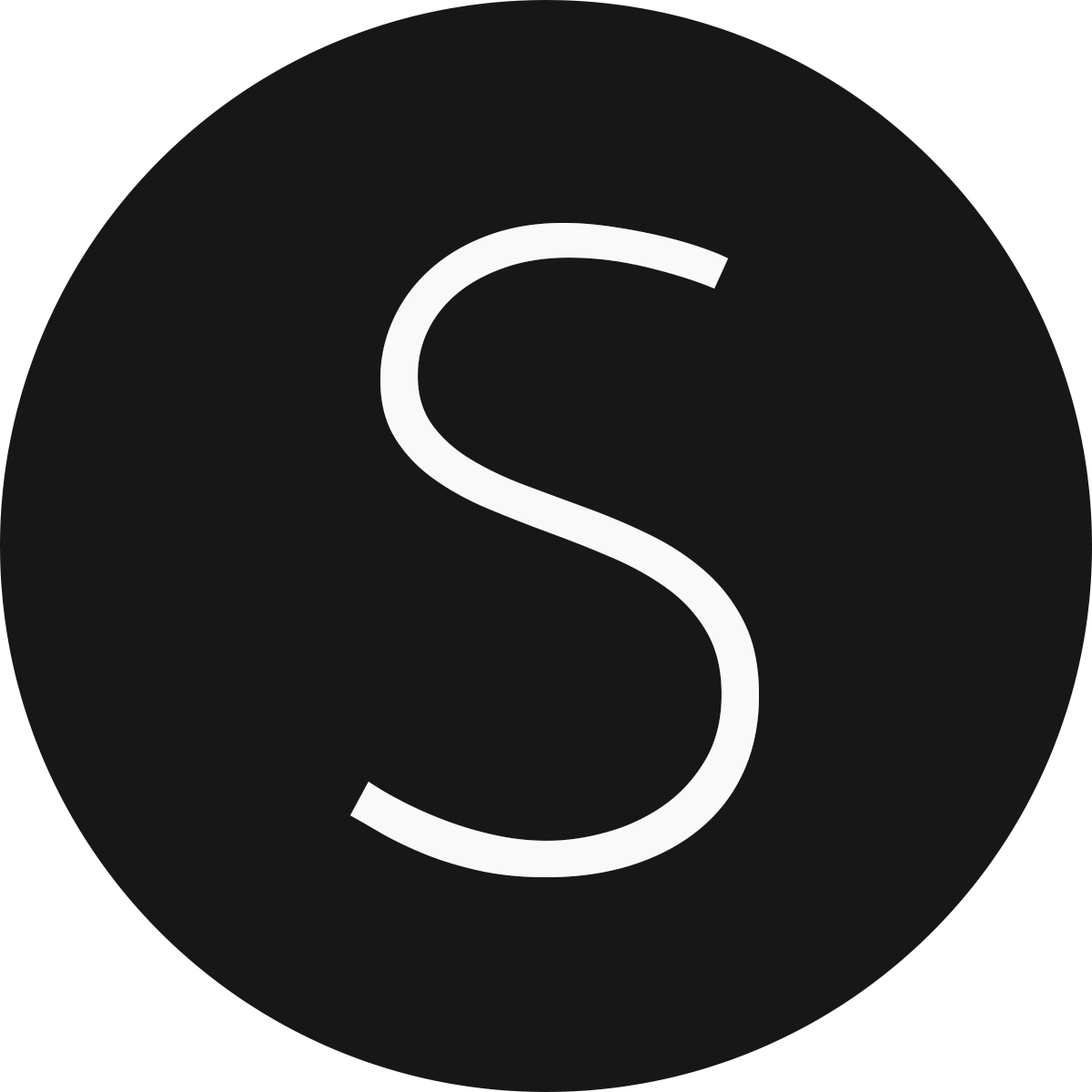
<style>
.page{position:relative;width:1092px;height:1092px;background:#171717}
.page>*{position:absolute;margin:0}
.t1{font:910px "JosefinSans-Light";letter-spacing:-0.06em;color:#f9f9f9}
</style>
<div class="page">
<p class="t1" style="left:350px;top:223px;width:409px;height:654px">S</p>
</div>
